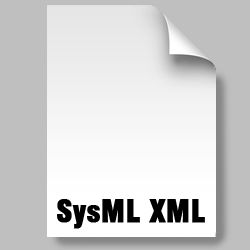
<style>
.page{position:relative;width:250px;height:250px;background:#bfbfbf}
.page>*{position:absolute;margin:0}
.t1{font:30px "Swiss721BT-BlackCondensed";color:#000000;font-weight:bold}
</style>
<div class="page">
<p class="t1" style="left:57px;top:199px;width:148px;height:30px">SysML XML</p>
</div>
